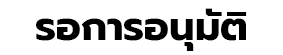
<style>
.page{position:relative;width:283px;height:55px;background:#ffffff}
.page>*{position:absolute;margin:0}
.t1{font:40px "Prompt-Bold";color:#000000}
</style>
<div class="page">
<p class="t1" style="left:36px;top:8px;width:211px;height:43px">รอการอนุมัติ</p>
</div>
